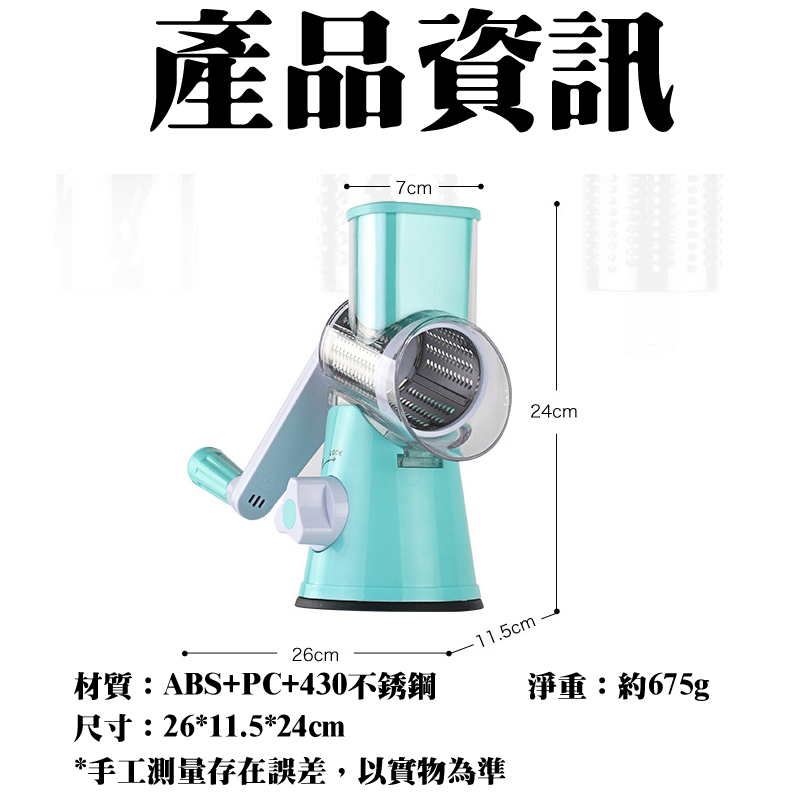
<style>
.page{position:relative;width:800px;height:800px;background:#ffffff}
.page>*{position:absolute;margin:0}
.t1{font:132.9px "HanWangMingBlack";color:#000000}
.t2{font:30px "HanWangMingBlack";color:#000000}
</style>
<div class="page">
<p class="t1" style="left:150px;top:8px;width:524px;height:125px">產品資訊</p>
<p class="t2" style="left:74px;top:671px;width:635px;height:115px">材質：ABS+PC+430不銹鋼      淨重：約675g<br>尺寸：26*11.5*24cm<br>*手工測量存在誤差，以實物為準</p>
</div>
